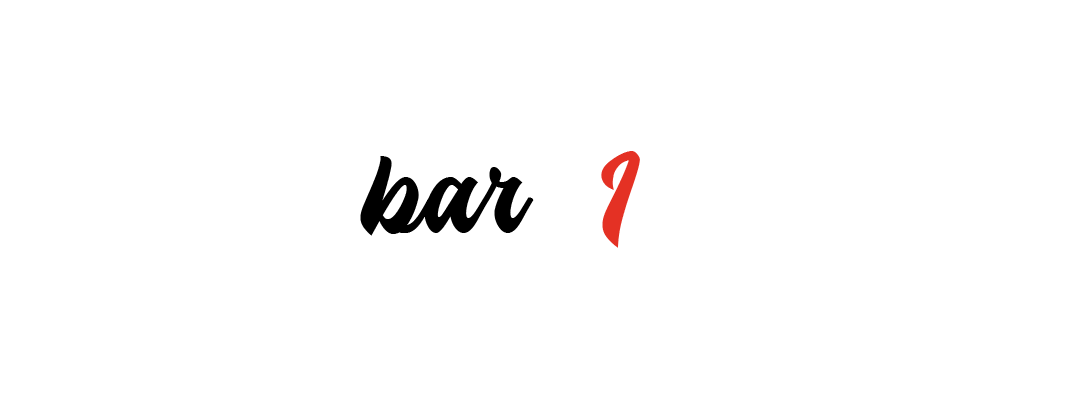
<style>
.page{position:relative;width:1080px;height:400px;background:#ffffff}
.page>*{position:absolute;margin:0}
.t1{font:100px "Troche";color:#000000}
.t2{font:100px "Troche";color:#ffffff}
.t3{font:100px "Troche";color:#e43124}
</style>
<div class="page">
<p class="t1" style="left:360px;top:146px;width:353px;height:107px">bar<span class="t2">F</span><span class="t3">I</span><span class="t2">B</span></p>
</div>
